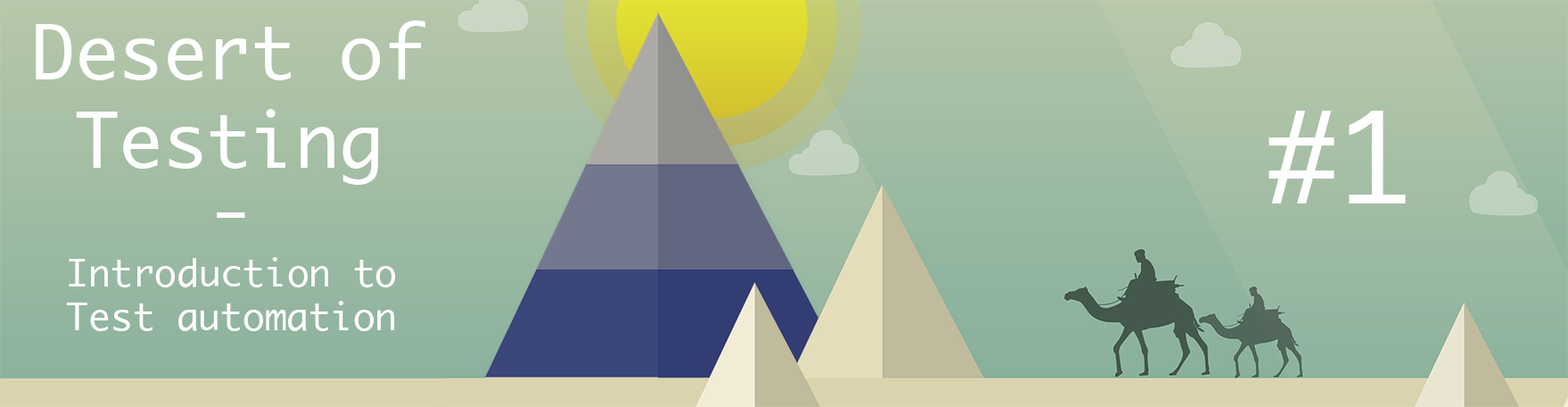
<style>
.page{position:relative;width:1568px;height:407px}
.page>*{position:absolute;margin:0}
.t1{font:73.5px "Ayuthaya";color:#ffffff}
.t2{font:122.5px "Ayuthaya";color:#ffffff}
.t3{font:36.8px "Ayuthaya";color:#ffffff}
</style>
<div class="page">
<p class="t1" style="left:36px;top:21px;width:389px;height:164px;text-align:center">Desert of<br>Testing</p>
<p class="t2" style="left:1268px;top:111px;width:138px;height:92px">#1</p>
<p class="t1" style="left:217px;top:212px;width:28px;height:6px">-</p>
<p class="t3" style="left:67px;top:257px;width:328px;height:74px;text-align:center">Introduction to<br>Test automation</p>
</div>
